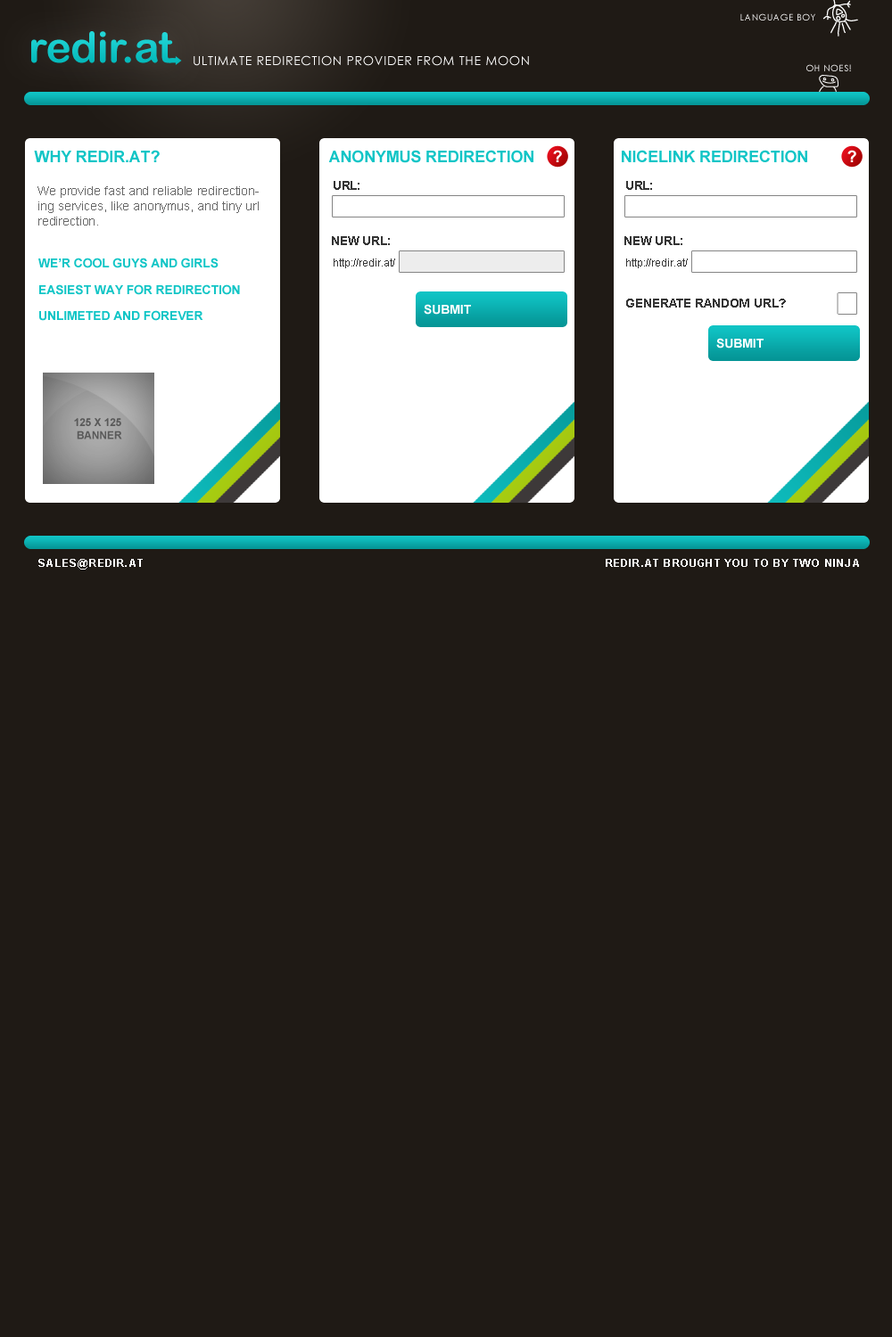
<style>
.page{position:relative;width:892px;height:1337px;background:#1f1a15}
.page>*{position:absolute;margin:0}
.t1{font:8.9px "CenturyGothic";letter-spacing:0.05em;text-transform:uppercase}
.t2{font:12.5px "CenturyGothic";letter-spacing:0.05em;color:#ffffff;text-transform:uppercase}
.t3{font:16px "Arial-BoldMT";letter-spacing:-0.01em;color:#11c5c6;text-transform:uppercase}
.t4{font:16px "Arial-BoldMT";letter-spacing:-0.01em;color:#ffffff;text-transform:uppercase}
.t5{font:12.5px "Arial-BoldMT";letter-spacing:-0.01em;color:#353535}
.t6{font:12.5px "ArialMT";letter-spacing:-0.01em;color:#686868}
.t7{font:12.5px "Arial-BoldMT";letter-spacing:-0.01em;color:#11c5c6;text-transform:uppercase}
.t8{font:10.7px "ArialMT";color:#353535}
.t9{font:12.5px "Arial-BoldMT";letter-spacing:-0.01em;color:#ffffff;text-transform:uppercase}
.t10{font:10.7px "Arial-BoldMT";letter-spacing:-0.01em;color:#5a5a5a;text-transform:uppercase}
.t11{font:10.7px "Arial-BoldMT";letter-spacing:0.1em;color:#ffffff;text-transform:uppercase}
</style>
<div class="page">
<p class="t1" style="left:740px;top:13px;width:75px;height:8px">language boy</p>
<p class="t2" style="left:193px;top:55px;width:336px;height:11px">ultimate redirection provider from the moon</p>
<p class="t1" style="left:806px;top:64px;width:45px;height:7px">Oh NOES!</p>
<p class="t3" style="left:34px;top:150px;width:126px;height:12px">Why redir.at?</p>
<p class="t3" style="left:328px;top:150px;width:205px;height:13px">Anonymus redirection</p>
<p class="t4" style="left:553px;top:150px;width:9px;height:12px">?</p>
<p class="t3" style="left:621px;top:150px;width:186px;height:13px">Nicelink redirection</p>
<p class="t4" style="left:847px;top:150px;width:9px;height:12px">?</p>
<p class="t5" style="left:333px;top:181px;width:26px;height:9px">URL:</p>
<p class="t5" style="left:626px;top:181px;width:26px;height:9px">URL:</p>
<p class="t6" style="left:37px;top:186px;width:222px;height:40px;text-align:justify">We provide fast and reliable redirectioning services, like anonymus, and tiny url redirection.</p>
<p class="t5" style="left:332px;top:236px;width:58px;height:9px">NEW URL:</p>
<p class="t5" style="left:624px;top:236px;width:58px;height:9px">NEW URL:</p>
<p class="t7" style="left:38px;top:258px;width:180px;height:10px">we’R cool guys and girls</p>
<p class="t8" style="left:333px;top:259px;width:62px;height:9px">http://redir.at/</p>
<p class="t8" style="left:626px;top:259px;width:61px;height:9px">http://redir.at/</p>
<p class="t7" style="left:39px;top:284px;width:201px;height:11px">Easiest way for redirection</p>
<p class="t9" style="left:424px;top:304px;width:47px;height:11px">Submit</p>
<p class="t5" style="left:626px;top:299px;width:160px;height:9px">GENERATE RANDOM URL?</p>
<p class="t7" style="left:39px;top:310px;width:164px;height:11px">unlimeted and forever</p>
<p class="t9" style="left:716px;top:338px;width:47px;height:11px">submit</p>
<p class="t10" style="left:74px;top:418px;width:48px;height:22px;text-align:center">125 x 125 <br>banner</p>
<p class="t11" style="left:38px;top:559px;width:105px;height:11px">sales@redir.at</p>
<p class="t11" style="left:605px;top:559px;width:254px;height:8px">redir.at brought you to by two ninja</p>
</div>
